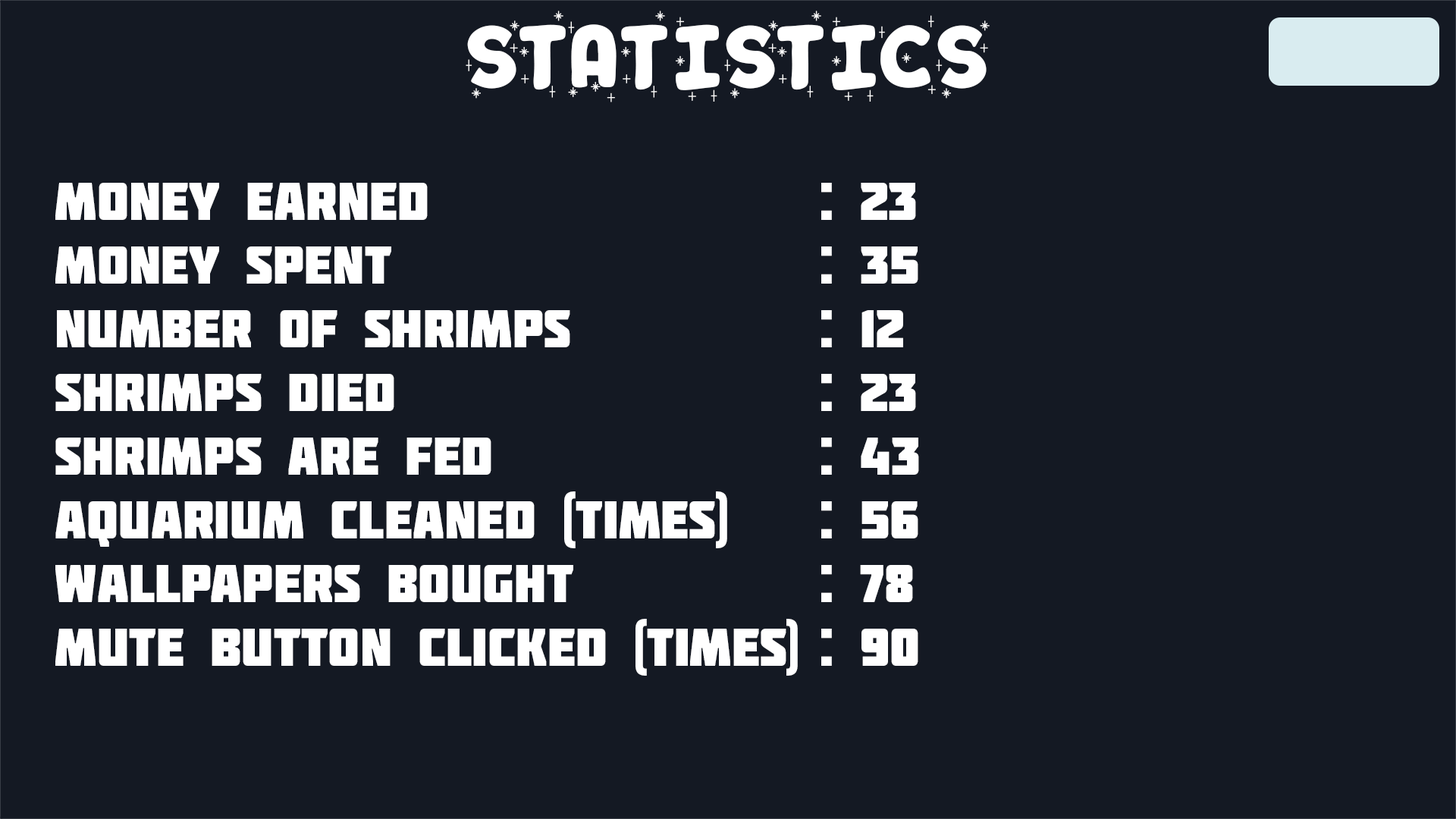
<style>
.page{position:relative;width:1456px;height:819px;background:#141923}
.page>*{position:absolute;margin:0}
.t1{font:79.6px "WinterDairy-Shiny";color:#ffffff}
.t2{font:53.1px "Molot";color:#ffffff}
</style>
<div class="page">
<p class="t1" style="left:466px;top:11px;width:524px;height:91px">STATISTICS</p>
<p class="t2" style="left:55px;top:183px;width:777px;height:493px">Money Earned               :<br>Money Spent                :<br>Number of Shrimps          :<br>Shrimps Died                :<br>Shrimps are Fed            :<br>Aquarium Cleaned (times)    :<br>Wallpapers Bought         :<br>Mute Button Clicked (times) :</p>
<p class="t2" style="left:860px;top:183px;width:59px;height:483px">23<br>35<br>12<br>23<br>43<br>56<br>78<br>90</p>
</div>
